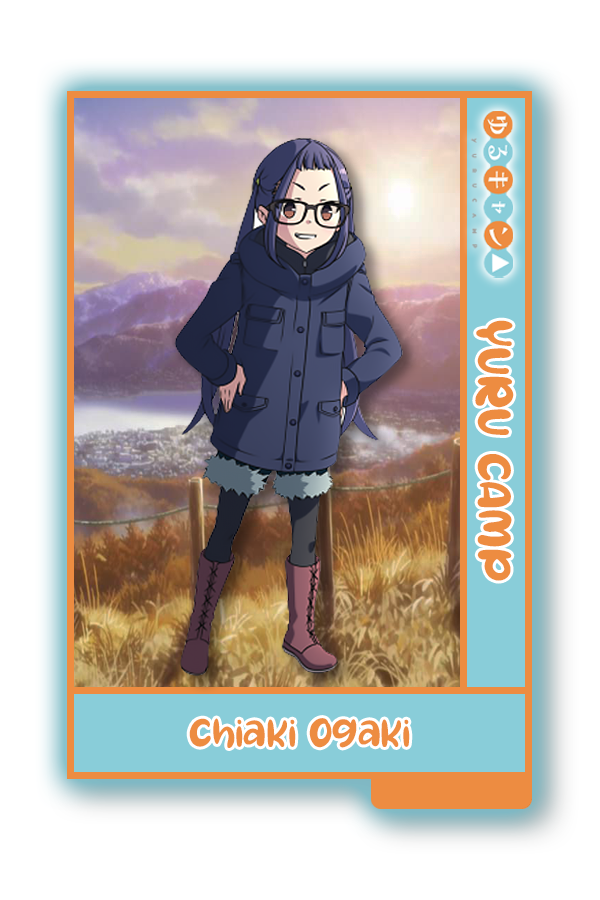
<style>
.page{position:relative;width:600px;height:900px;background:#ffffff}
.page>*{position:absolute;margin:0}
.t1{font:48.8px "OhMyBaby";color:#ed8c41}
.t2{font:41.1px "OhMyBaby";color:#ed8c41;scale:0.94 1}
</style>
<div class="page">
<p class="t1" style="left:475px;top:320px;width:39px;height:261px;rotate:90deg">YURU CAMP</p>
<p class="t2" style="left:189px;top:718px;width:221px;height:30px">Chiaki Ogaki</p>
</div>
